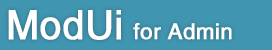
<style>
.page{position:relative;width:272px;height:50px;background:#4095b0}
.page>*{position:absolute;margin:0}
.t1{font:40.5px "FZHTJW--GB1-0";color:#ffffff;font-weight:bold;scale:0.96 1}
.t2{font:22px "FZHTJW--GB1-0";color:#ffffff;font-weight:bold}
</style>
<div class="page">
<p class="t1" style="left:8px;top:10px;width:113px;height:30px">ModUi</p>
<p class="t2" style="left:133px;top:23px;width:99px;height:17px">for Admin</p>
</div>
